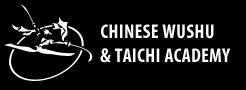
<style>
.page{position:relative;width:246px;height:90px;background:#000000}
.page>*{position:absolute;margin:0}
.t1{font:20px "MyriadPro-BoldCond";letter-spacing:0.01em;color:#ffffff}
</style>
<div class="page">
<p class="t1" style="left:100px;top:24px;width:131px;height:39px">CHINESE WUSHU<br>&amp; TAICHI ACADEMY</p>
</div>
